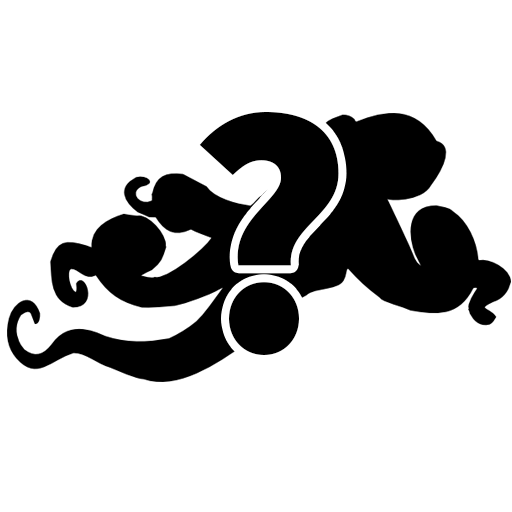
<style>
.page{position:relative;width:512px;height:512px;background:#ffffff}
.page>*{position:absolute;margin:0}
.t1{font:350px "SourceSansPro-Black";color:#000000}
</style>
<div class="page">
<p class="t1" style="left:199px;top:112px;width:140px;height:243px">?</p>
</div>
